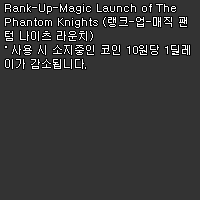
<style>
.page{position:relative;width:200px;height:200px;background:#333333}
.page>*{position:absolute;margin:0}
.t1{font:11px/14px "Dotum";color:#ffffff}
</style>
<div class="page">
<p class="t1" style="left:5px;top:4px;width:185px;height:65px">Rank-Up-Magic Launch of The <br>Phantom Knights (랭크-업-매직 팬<br>텀 나이츠 라운치)<br>˚ 사용 시 소지중인 코인 10원당 1딜레<br>이가 감소됩니다.</p>
</div>
